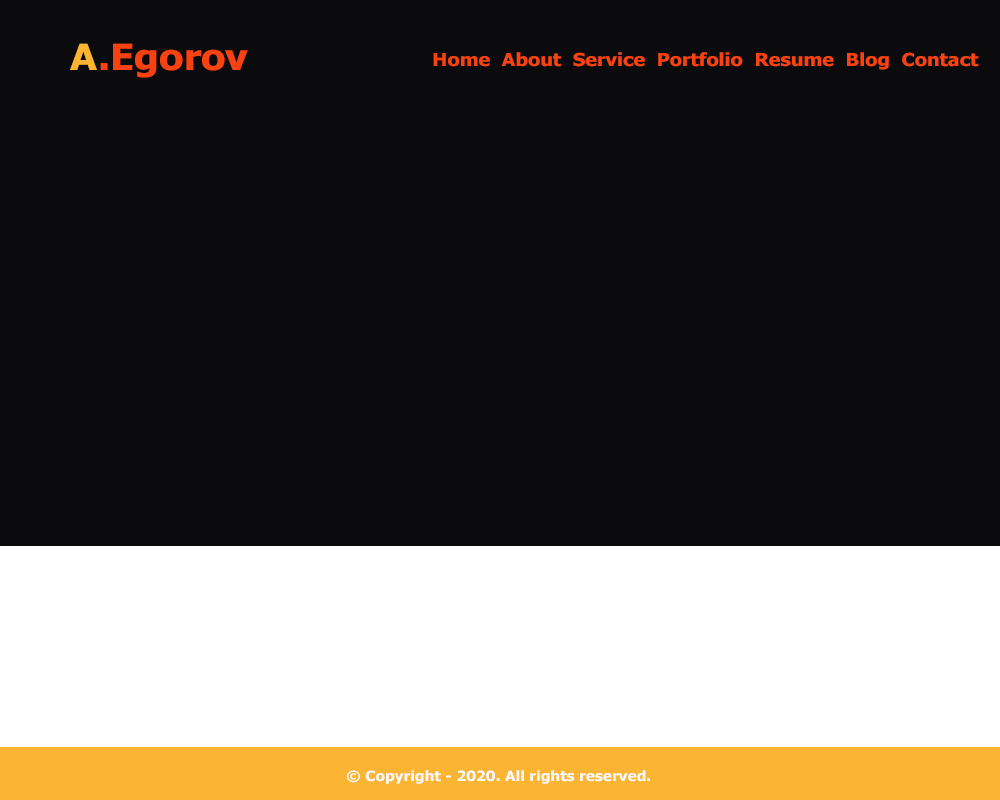
<style>
.page{position:relative;width:1000px;height:800px;background:#0b0b0d}
.page>*{position:absolute;margin:0}
.t1{font:36px "Tahoma-Bold";color:#f84211;scale:1.1 1}
.t2{font:36px "Tahoma-Bold";color:#fcb532;scale:1.1 1}
.t3{font:18px "Tahoma-Bold";color:#f84211;scale:1.1 1}
.t4{font:14px "Tahoma-Bold";color:#fdf9f9;scale:1.1 1}
</style>
<div class="page">
<p class="t1" style="left:70px;top:43px;width:178px;height:35px"><span class="t2">A</span>.Egorov</p>
<p class="t3" style="left:433px;top:52px;width:546px;height:18px">Home  About  Service  Portfolio  Resume  Blog  Contact</p>
<p class="t4" style="left:347px;top:770px;width:303px;height:14px">© Copyright - 2020. All rights reserved.</p>
</div>
